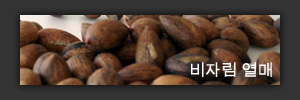
<style>
.page{position:relative;width:300px;height:100px;background:#333333}
.page>*{position:absolute;margin:0}
.t1{font:16px "ArialUnicodeMS";color:#fffefe}
</style>
<div class="page">
<p class="t1" style="left:191px;top:62px;width:81px;height:15px">비자림 열매</p>
</div>
